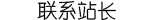
<style>
.page{position:relative;width:153px;height:20px;background:#ffffff}
.page>*{position:absolute;margin:0}
.t1{font:20px "YouYuan";color:#000000}
</style>
<div class="page">
<p class="t1" style="left:37px;top:0px;width:79px;height:21px">联系站长</p>
</div>
